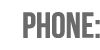
<style>
.page{position:relative;width:100px;height:50px;background:#ffffff}
.page>*{position:absolute;margin:0}
.t1{font:36px "BebasNeue";letter-spacing:-0.025em;color:#6a6a6a;font-weight:bold}
</style>
<div class="page">
<p class="t1" style="left:23px;top:12px;width:77px;height:26px">phone:</p>
</div>
